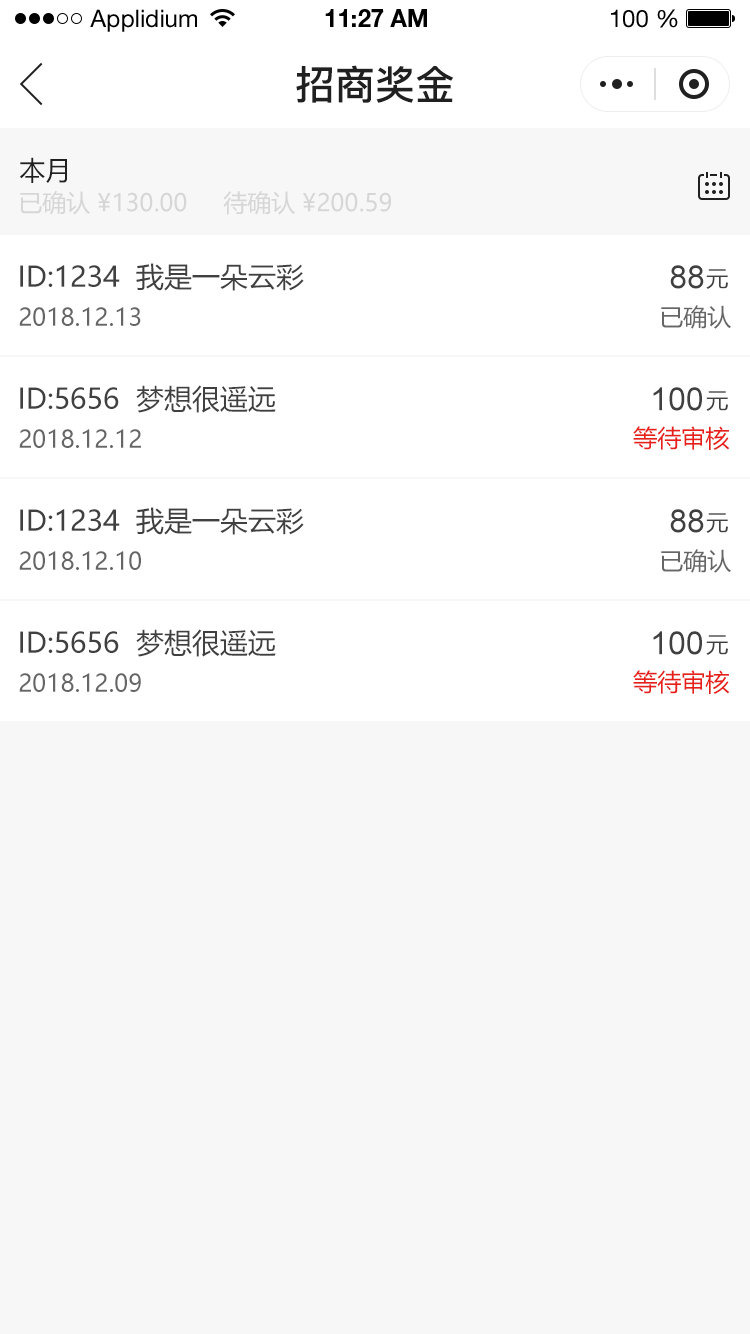
<style>
.page{position:relative;width:750px;height:1334px;background:#f7f7f7}
.page>*{position:absolute;margin:0}
.t1{font:24px "HelveticaNeueLTStd-Roman";color:#000000}
.t2{font:24px "HelveticaNeueLTStd-Bd";color:#000000}
.t3{font:40px "PingFang-SC-Bold";color:#202020;text-transform:uppercase}
.t4{font:26px "MicrosoftYaHei";color:#202020;text-transform:uppercase}
.t5{font:24px "MicrosoftYaHei";color:#d6d6d6;text-transform:uppercase}
.t6{font:28px "MicrosoftYaHei";color:#404040;text-transform:uppercase}
.t7{font:32px "ArialMT";color:#404040;text-transform:uppercase}
.t8{font:22px "MicrosoftYaHei";color:#404040;text-transform:uppercase}
.t9{font:24px "MicrosoftYaHei";color:#666666;text-transform:uppercase}
.t10{font:24px "MicrosoftYaHei";color:#e61f18;text-transform:uppercase}
</style>
<div class="page">
<p class="t1" style="left:90px;top:9px;width:107px;height:23px">Applidium</p>
<p class="t2" style="left:325px;top:9px;width:102px;height:18px">11:27 AM</p>
<p class="t1" style="left:611px;top:9px;width:67px;height:19px">100 %</p>
<p class="t3" style="left:296px;top:65px;width:158px;height:38px">招商奖金</p>
<p class="t4" style="left:20px;top:157px;width:47px;height:26px">本月</p>
<p class="t5" style="left:20px;top:191px;width:167px;height:24px">已确认 ¥130.00</p>
<p class="t5" style="left:223px;top:191px;width:168px;height:24px">待确认 ¥200.59</p>
<p class="t6" style="left:20px;top:263px;width:284px;height:28px">ID:1234  我是一朵云彩</p>
<p class="t7" style="left:670px;top:265px;width:34px;height:24px">88</p>
<p class="t8" style="left:706px;top:269px;width:22px;height:20px">元</p>
<p class="t9" style="left:661px;top:305px;width:70px;height:24px">已确认</p>
<p class="t9" style="left:19px;top:307px;width:122px;height:19px">2018.12.13</p>
<p class="t6" style="left:20px;top:385px;width:256px;height:28px">ID:5656  梦想很遥远</p>
<p class="t7" style="left:653px;top:387px;width:49px;height:24px">100</p>
<p class="t8" style="left:706px;top:391px;width:22px;height:20px">元</p>
<p class="t9" style="left:19px;top:429px;width:122px;height:19px">2018.12.12</p>
<p class="t10" style="left:633px;top:426px;width:97px;height:24px">等待审核</p>
<p class="t6" style="left:20px;top:507px;width:284px;height:28px">ID:1234  我是一朵云彩</p>
<p class="t7" style="left:670px;top:509px;width:34px;height:24px">88</p>
<p class="t8" style="left:706px;top:513px;width:22px;height:20px">元</p>
<p class="t9" style="left:19px;top:551px;width:122px;height:19px">2018.12.10</p>
<p class="t9" style="left:661px;top:549px;width:70px;height:24px">已确认</p>
<p class="t6" style="left:20px;top:629px;width:256px;height:28px">ID:5656  梦想很遥远</p>
<p class="t7" style="left:653px;top:631px;width:49px;height:24px">100</p>
<p class="t8" style="left:706px;top:635px;width:22px;height:20px">元</p>
<p class="t9" style="left:19px;top:673px;width:122px;height:19px">2018.12.09</p>
<p class="t10" style="left:633px;top:670px;width:97px;height:24px">等待审核</p>
</div>
